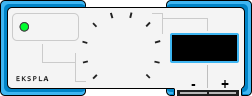
<style>
.page{position:relative;width:252px;height:96px;background:#f4f4f4}
.page>*{position:absolute;margin:0}
.t1{font:7.5px "Candara-Bold";letter-spacing:0.2em;color:#000000;text-transform:uppercase}
.t2{font:16.9px "Candara-Bold";letter-spacing:0.2em;color:#000000;text-transform:uppercase}
</style>
<div class="page">
<p class="t1" style="left:16px;top:76px;width:33px;height:6px">ekspla</p>
<p class="t2" style="left:191px;top:84px;width:5px;height:2px">-</p>
<p class="t2" style="left:221px;top:80px;width:8px;height:8px">+</p>
</div>
